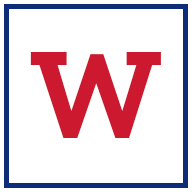
<style>
.page{position:relative;width:192px;height:192px;background:#ffffff}
.page>*{position:absolute;margin:0}
.t1{font:148px "Rokkitt-Bold";color:#cc192f}
</style>
<div class="page">
<p class="t1" style="left:30px;top:52px;width:131px;height:86px">W</p>
</div>
